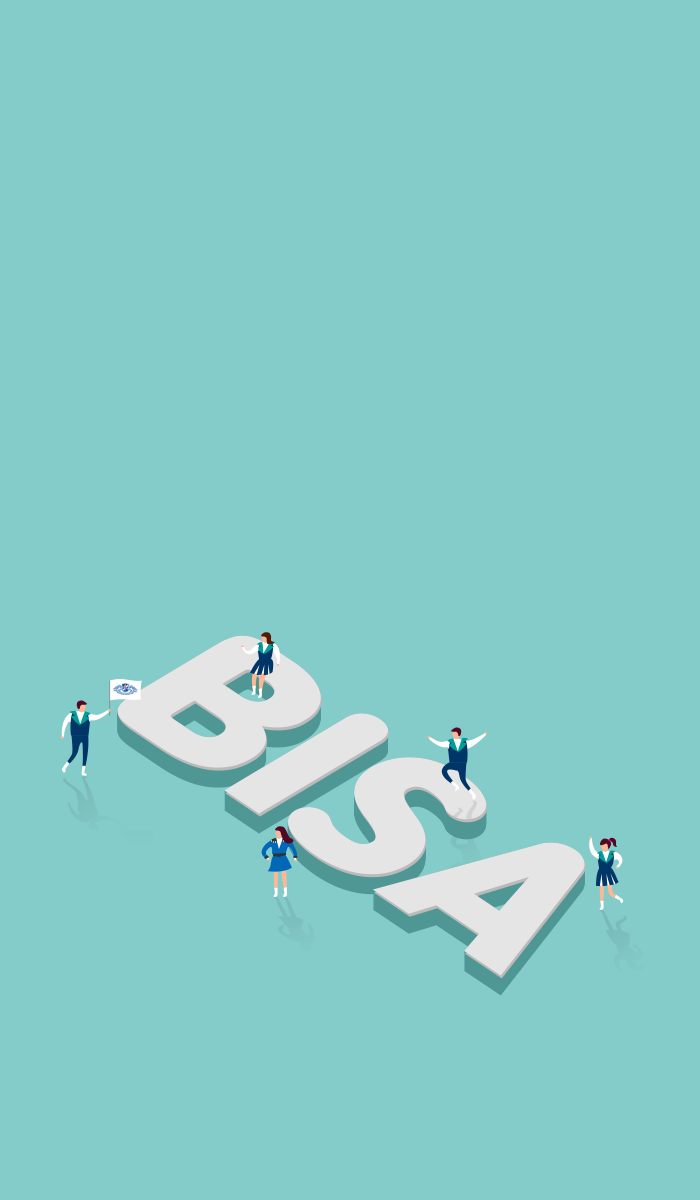
<style>
.page{position:relative;width:700px;height:1200px;background:#84ccc9}
.page>*{position:absolute;margin:0}
.t1{font:199.2px "JalnanOTF";color:#e5e5e5}
</style>
<div class="page">
<p class="t1" style="left:117px;top:635px;width:468px;height:341px;rotate:34deg">BISA</p>
</div>
